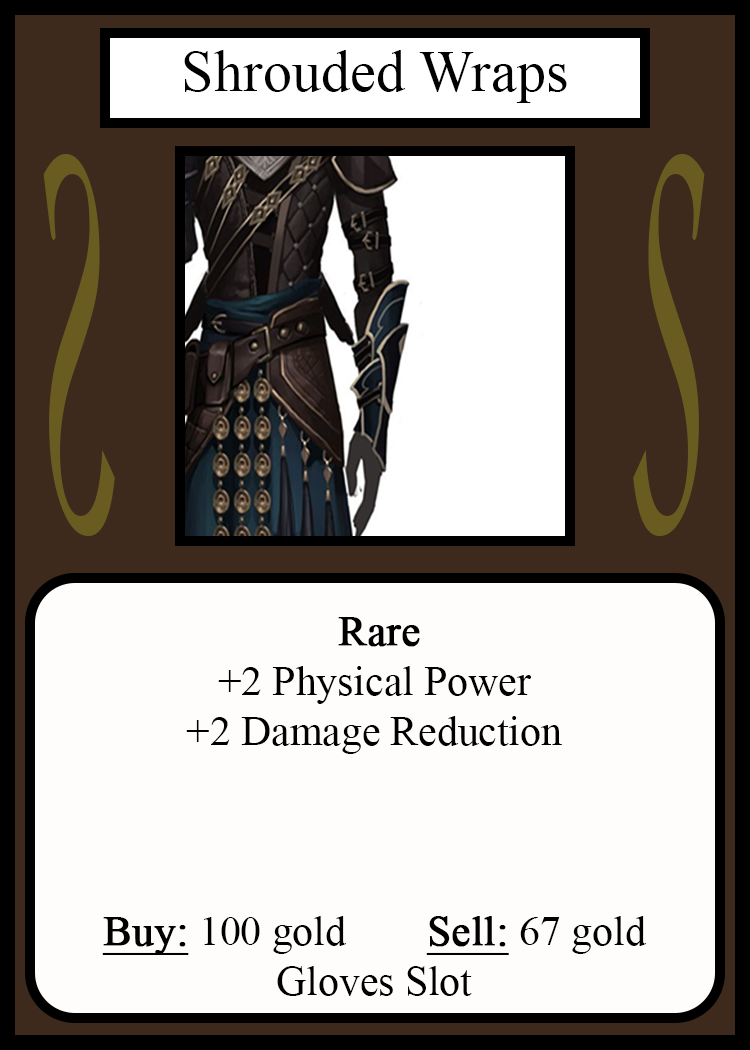
<style>
.page{position:relative;width:750px;height:1050px;background:#fffcfc}
.page>*{position:absolute;margin:0}
.t1{font:58.3px "TimesNewRomanPSMT";color:#010101}
.t2{font:548.5px "Apple-Chancery";color:#6a5c21;scale:0.27 1}
.t3{font:548.2px "Apple-Chancery";color:#6a5c21;scale:0.27 1}
.t4{font:41.7px "TimesNewRomanPSMT";color:#000000}
.t5{font:41.7px "TimesNewRomanPSMT";color:#000000;font-weight:bold}
.t6{font:41.7px "TimesNewRomanPSMT";color:#000000;font-weight:bold;text-decoration:underline}
</style>
<div class="page">
<p class="t1" style="left:184px;top:50px;width:383px;height:53px">Shrouded Wraps</p>
<p class="t2" style="left:43px;top:154px;width:72px;height:382px;rotate:180deg">S</p>
<p class="t3" style="left:633px;top:154px;width:72px;height:382px">S</p>
<p class="t4" style="left:102px;top:617px;width:545px;height:379px;text-align:center"><span class="t5">Rare</span><br>+2 Physical Power<br>+2 Damage Reduction<br><br><br><br><span class="t6">Buy:</span> 100 gold   <span class="t6">Sell:</span> 67 gold<br>Gloves Slot</p>
</div>
